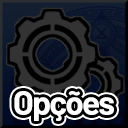
<style>
.page{position:relative;width:128px;height:128px}
.page>*{position:absolute;margin:0}
.t1{font:33.3px "Barlow-Bold";letter-spacing:-0.05em;color:#ffffff}
</style>
<div class="page">
<p class="t1" style="left:14px;top:91px;width:100px;height:30px">Opções</p>
</div>
